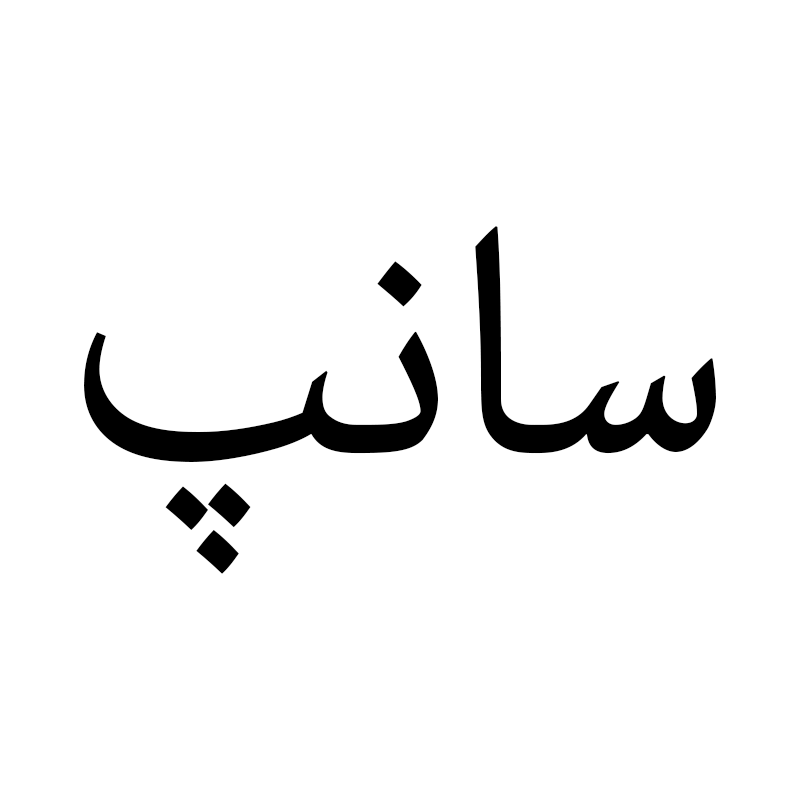
<style>
.page{position:relative;width:800px;height:800px;background:#ffffff}
.page>*{position:absolute;margin:0}
.t1{font:450px "AdobeArabic-Regular";color:#000000}
</style>
<div class="page">
<p class="t1" style="left:84px;top:226px;width:632px;height:348px">سانپ</p>
</div>
